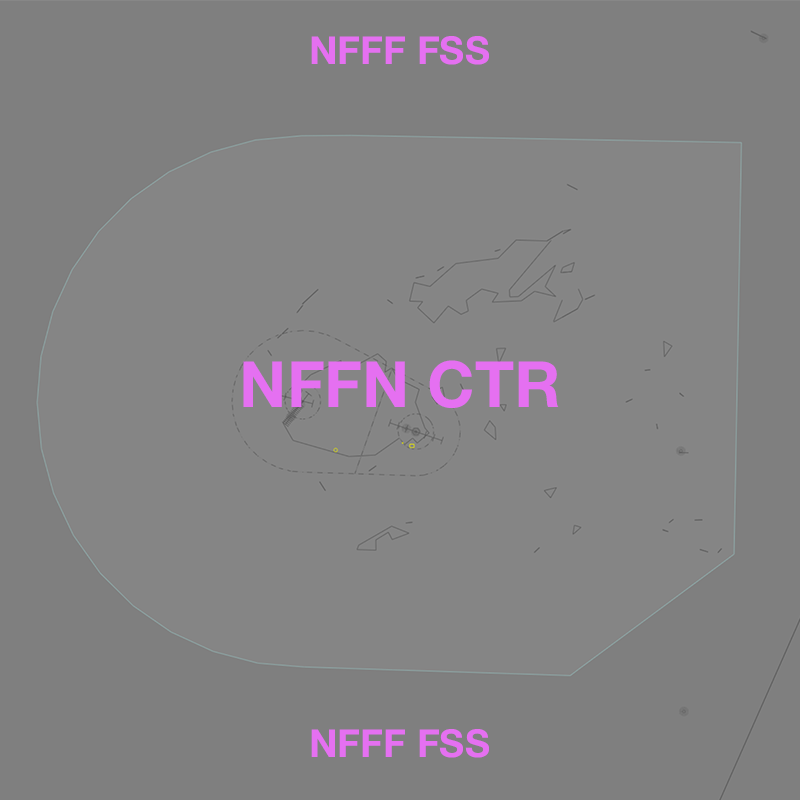
<style>
.page{position:relative;width:800px;height:800px;background:#858585}
.page>*{position:absolute;margin:0}
.t1{font:38.6px "HelveticaNeue-Bold";color:#e570f1}
.t2{font:63.8px "HelveticaNeue-Bold";color:#e570f1}
</style>
<div class="page">
<p class="t1" style="left:311px;top:36px;width:178px;height:29px">NFFF FSS</p>
<p class="t2" style="left:243px;top:360px;width:316px;height:48px">NFFN CTR</p>
<p class="t1" style="left:311px;top:729px;width:178px;height:29px">NFFF FSS</p>
</div>
